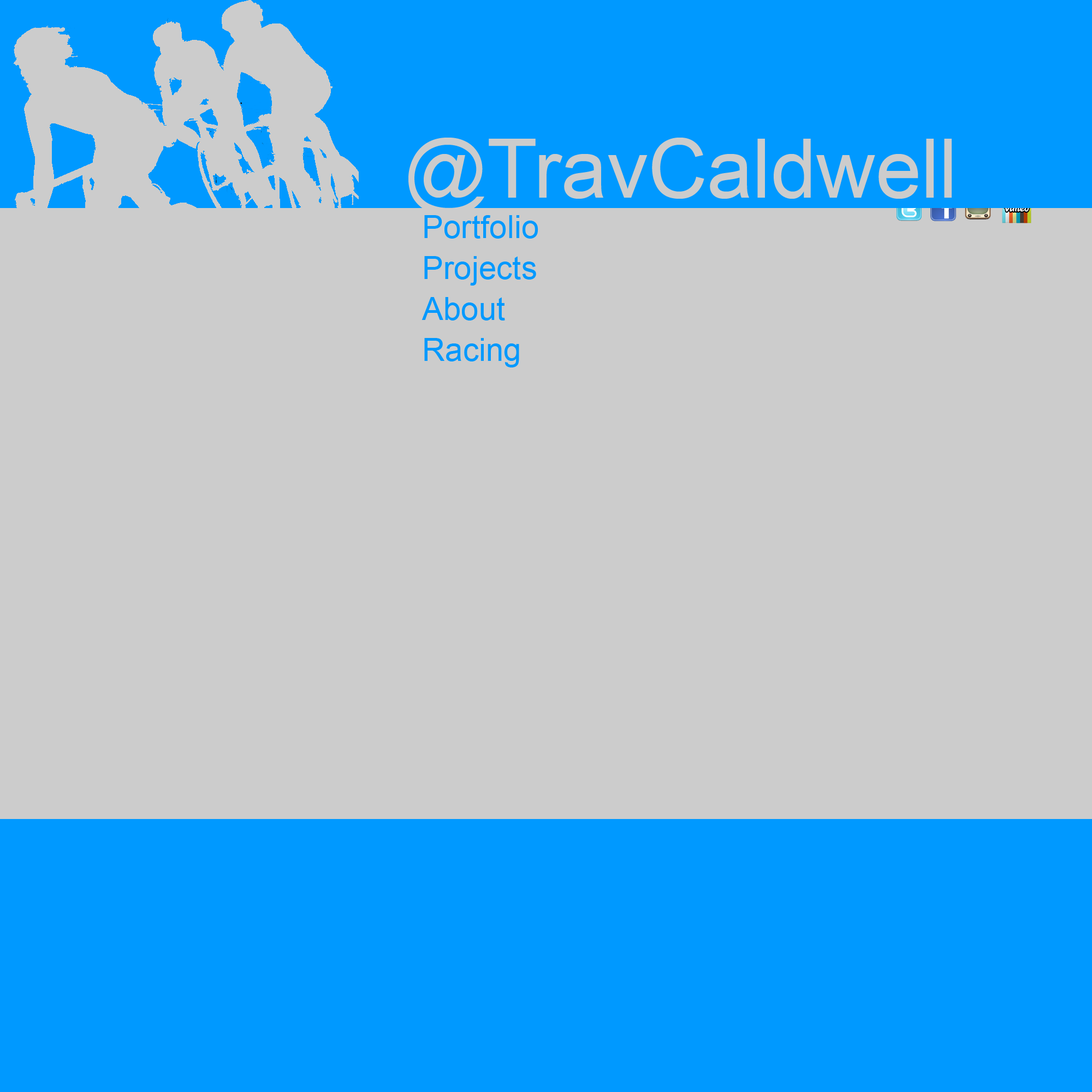
<style>
.page{position:relative;width:1092px;height:1092px;background:#cccccc}
.page>*{position:absolute;margin:0}
.t1{font:81.9px "ArialMT";color:#cccccc}
.t2{font:31.8px "ArialMT";color:#0099ff}
</style>
<div class="page">
<p class="t1" style="left:408px;top:138px;width:544px;height:77px">@TravCaldwell</p>
<p class="t2" style="left:424px;top:215px;width:114px;height:24px">Portfolio</p>
<p class="t2" style="left:424px;top:256px;width:112px;height:30px">Projects</p>
<p class="t2" style="left:422px;top:297px;width:83px;height:23px">About</p>
<p class="t2" style="left:424px;top:338px;width:95px;height:29px">Racing</p>
</div>
